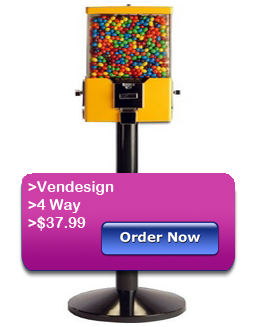
<style>
.page{position:relative;width:254px;height:327px;background:#ffffff}
.page>*{position:absolute;margin:0}
.t1{font:15px "ArialRoundedMTBold";color:#ffffff}
</style>
<div class="page">
<p class="t1" style="left:28px;top:181px;width:86px;height:50px">&gt;Vendesign <br>&gt;4 Way<br>&gt;$37.99</p>
</div>
